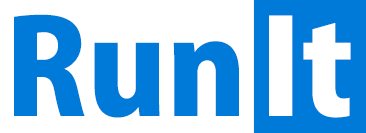
<style>
.page{position:relative;width:366px;height:133px;background:#ffffff}
.page>*{position:absolute;margin:0}
.t1{font:130px "KozGoPro-Heavy";color:#007ad9}
.t2{font:130px "KozGoPro-Heavy";color:#ffffff}
</style>
<div class="page">
<p class="t1" style="left:14px;top:14px;width:225px;height:104px">Run</p>
<p class="t2" style="left:269px;top:15px;width:82px;height:103px">It</p>
</div>
